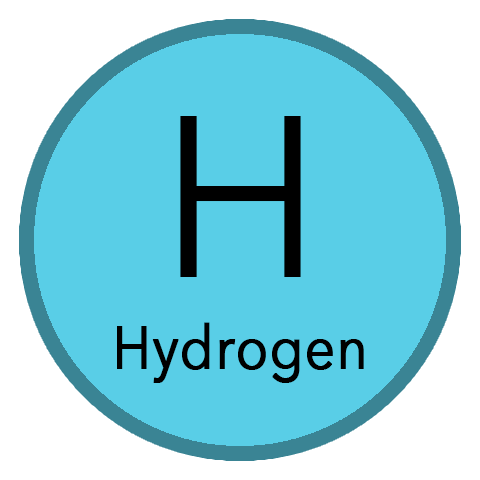
<style>
.page{position:relative;width:480px;height:480px;background:#59cee7}
.page>*{position:absolute;margin:0}
.t1{font:227.2px "AvenirNext-Regular";letter-spacing:-0.04em;color:#000000}
.t2{font:60px "AvenirNext-Regular";color:#000000;font-weight:bold;scale:0.89 1}
</style>
<div class="page">
<p class="t1" style="left:180px;top:116px;width:121px;height:161px">H</p>
<p class="t2" style="left:117px;top:322px;width:247px;height:61px">Hydrogen</p>
</div>
